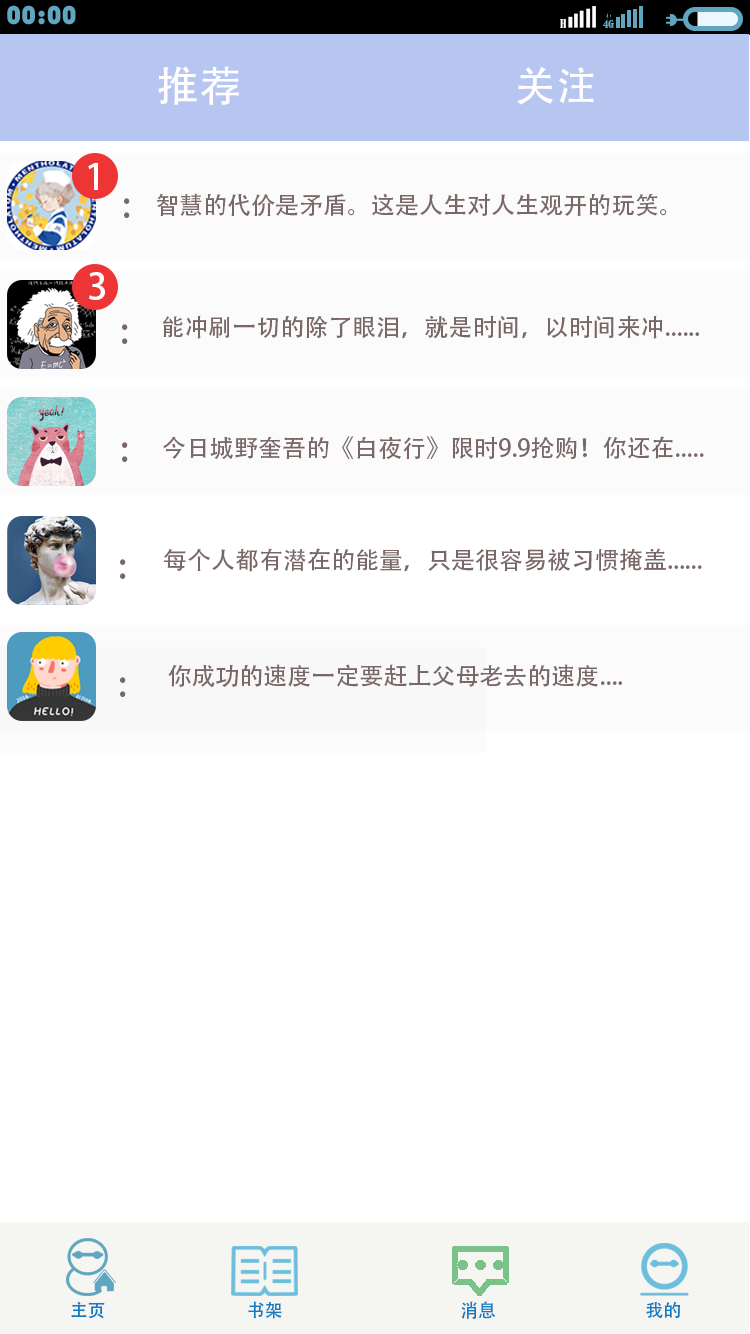
<style>
.page{position:relative;width:750px;height:1334px;background:#ffffff}
.page>*{position:absolute;margin:0}
.t1{font:42.8px "AdobeHeitiStd-Regular";color:#ffffff}
.t2{font:40.3px "AdobeHeitiStd-Regular";color:#ffffff}
.t3{font:36px "AdobeHeitiStd-Regular";color:#ffffff}
.t4{font:36px "AdobeHeitiStd-Regular";color:#796767}
.t5{font:24px "AdobeHeitiStd-Regular";color:#796767}
.t6{font:18px "AdobeHeitiStd-Regular";color:#137bc4}
</style>
<div class="page">
<p class="t1" style="left:158px;top:66px;width:81px;height:39px">推荐</p>
<p class="t2" style="left:517px;top:66px;width:77px;height:39px">关注</p>
<p class="t3" style="left:88px;top:163px;width:10px;height:27px">1</p>
<p class="t4" style="left:124px;top:198px;width:6px;height:20px">:</p>
<p class="t5" style="left:157px;top:193px;width:510px;height:24px">智慧的代价是矛盾。这是人生对人生观开的玩笑。</p>
<p class="t3" style="left:89px;top:272px;width:16px;height:28px">3</p>
<p class="t5" style="left:163px;top:315px;width:536px;height:24px">能冲刷一切的除了眼泪，就是时间，以时间来冲......</p>
<p class="t4" style="left:122px;top:324px;width:6px;height:20px">:</p>
<p class="t5" style="left:163px;top:436px;width:541px;height:23px">今日城野奎吾的《白夜行》限时9.9抢购！你还在.....</p>
<p class="t4" style="left:122px;top:442px;width:6px;height:20px">:</p>
<p class="t5" style="left:164px;top:548px;width:538px;height:24px">每个人都有潜在的能量，只是很容易被习惯掩盖......</p>
<p class="t4" style="left:120px;top:559px;width:6px;height:20px">:</p>
<p class="t5" style="left:168px;top:664px;width:454px;height:23px">你成功的速度一定要赶上父母老去的速度....</p>
<p class="t4" style="left:120px;top:677px;width:6px;height:20px">:</p>
<p class="t6" style="left:71px;top:1301px;width:609px;height:18px">主页                                   书架                                            消息                                     我的</p>
</div>
